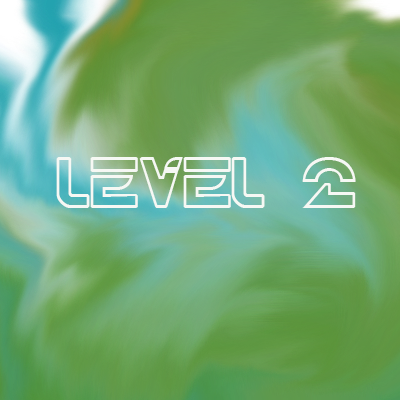
<style>
.page{position:relative;width:400px;height:400px}
.page>*{position:absolute;margin:0}
.t1{font:72px "TRN";color:#f6f8f4}
</style>
<div class="page">
<p class="t1" style="left:56px;top:157px;width:300px;height:51px">Level 2</p>
</div>
